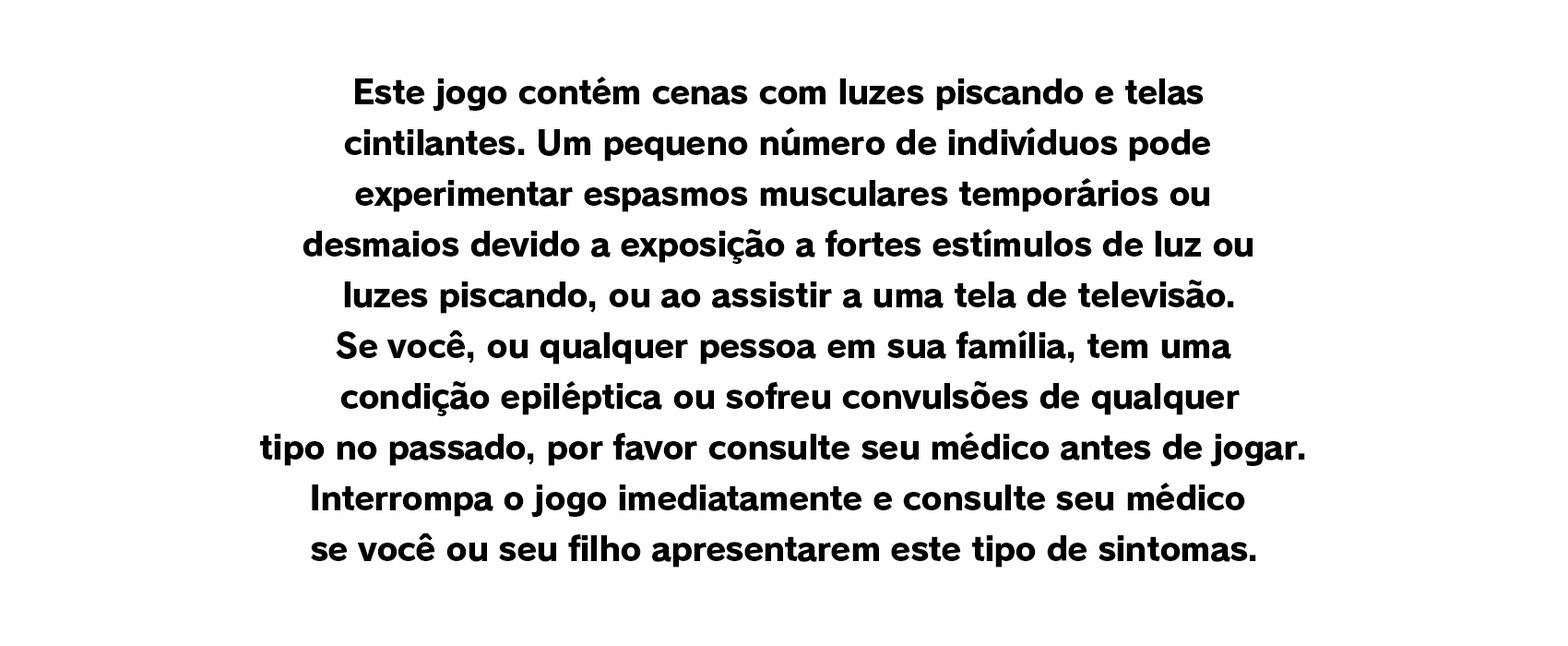
<style>
.page{position:relative;width:1568px;height:646px;background:#fffeff}
.page>*{position:absolute;margin:0}
.t1{font:33.2px "RodinPro-EB";letter-spacing:-0.032em;color:#000000}
.t2{font:33.2px "RodinPro-EB";letter-spacing:-0.033em;color:#000000}
.t3{font:33.2px "RodinPro-EB";letter-spacing:-0.029em;color:#000000}
.t4{font:33.2px "RodinPro-EB";letter-spacing:-0.03em;color:#000000}
</style>
<div class="page">
<p class="t1" style="left:355px;top:76px;width:849px;height:36px">Este jogo contém cenas com luzes piscando e telas</p>
<p class="t1" style="left:344px;top:126px;width:867px;height:35px">cintilantes. Um pequeno número de indivíduos pode</p>
<p class="t1" style="left:355px;top:177px;width:854px;height:35px">experimentar espasmos musculares temporários ou</p>
<p class="t2" style="left:303px;top:228px;width:950px;height:36px"><span class="t1">desmaios devido a </span>exposição a fortes estímulos de luz ou</p>
<p class="t3" style="left:344px;top:279px;width:890px;height:35px"><span class="t2"> luzes piscando, </span>ou ao assistir a uma tela de televisão.</p>
<p class="t3" style="left:336px;top:329px;width:895px;height:35px">Se você, ou qualquer pessoa em sua família, tem uma</p>
<p class="t4" style="left:340px;top:380px;width:900px;height:36px"><span class="t3"> condição epiléptica ou </span>sofreu convulsões de qualquer</p>
<p class="t4" style="left:260px;top:431px;width:1045px;height:36px">tipo no passado, por favor consulte <span class="t1">seu médico antes de jogar.</span></p>
<p class="t1" style="left:312px;top:481px;width:933px;height:36px">Interrompa o jogo imediatamente <span class="t4">e consulte seu médico</span></p>
<p class="t1" style="left:311px;top:532px;width:945px;height:35px"><span class="t4">se você ou seu filho </span>apresentarem este tipo de sintomas.</p>
</div>
